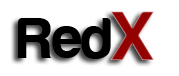
<style>
.page{position:relative;width:179px;height:76px;background:#ffffff}
.page>*{position:absolute;margin:0}
.t1{font:72px "Harabara";color:#930101}
.t2{font:60px "Harabara";color:#000000}
</style>
<div class="page">
<p class="t1" style="left:111px;top:11px;width:43px;height:49px">X</p>
<p class="t2" style="left:18px;top:18px;width:93px;height:41px">Red</p>
</div>
